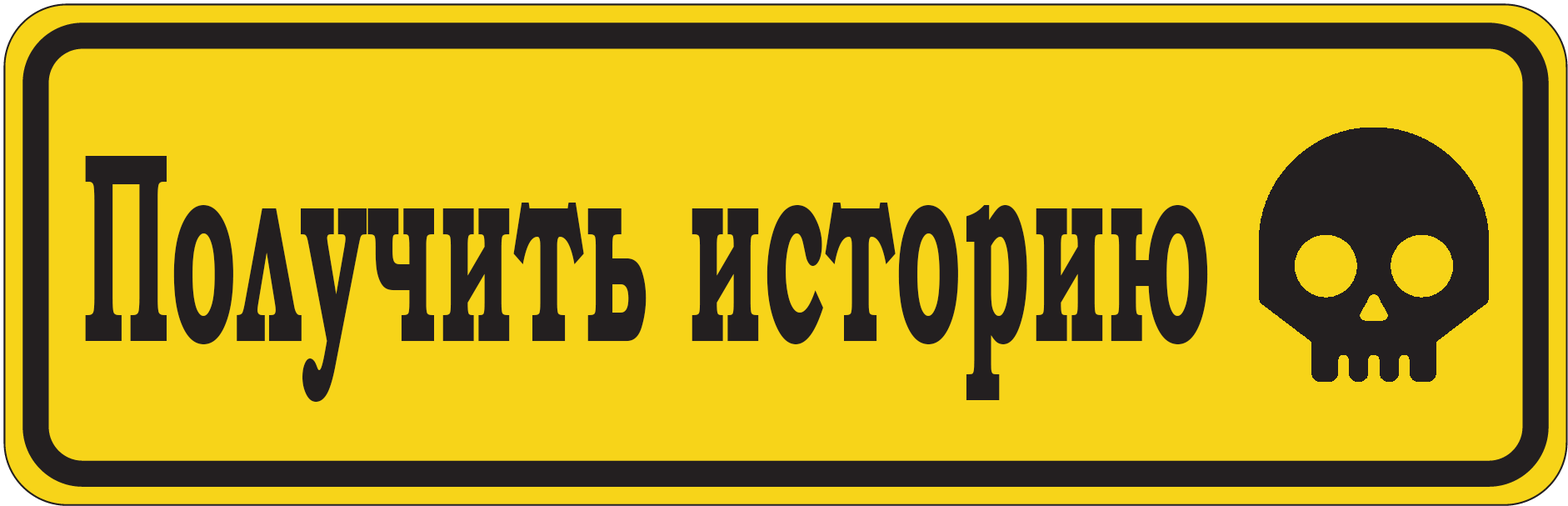
<style>
.page{position:relative;width:1568px;height:506px;background:#f7d419}
.page>*{position:absolute;margin:0}
.t1{font:271.8px "BookmanOldStyle-Bold";color:#231f20;scale:0.4 1}
</style>
<div class="page">
<p class="t1" style="left:85px;top:156px;width:1123px;height:246px">Получить историю</p>
</div>
